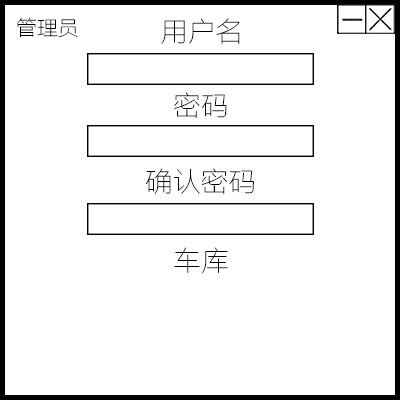
<style>
.page{position:relative;width:400px;height:400px;background:#ffffff}
.page>*{position:absolute;margin:0}
.t1{font:20.9px "FZLTCXHJW--GB1-0";color:#000000}
.t2{font:27.8px "FZLTCXHJW--GB1-0";color:#000000}
</style>
<div class="page">
<p class="t1" style="left:16px;top:17px;width:62px;height:21px">管理员</p>
<p class="t2" style="left:161px;top:18px;width:79px;height:26px">用户名</p>
<p class="t2" style="left:174px;top:92px;width:53px;height:26px">密码</p>
<p class="t2" style="left:146px;top:168px;width:108px;height:26px">确认密码</p>
<p class="t2" style="left:174px;top:247px;width:54px;height:27px">车库</p>
</div>
